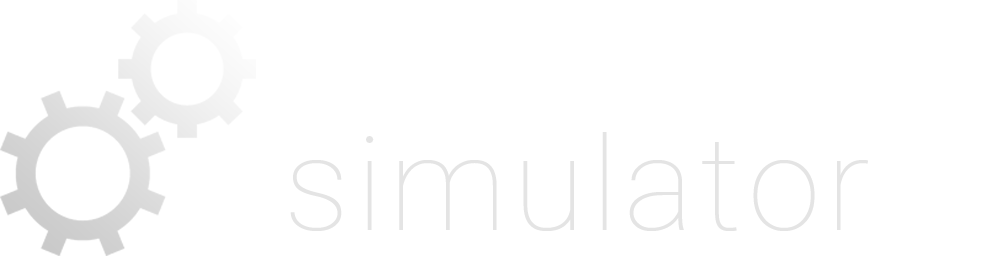
<style>
.page{position:relative;width:1000px;height:256px;background:#ffffff}
.page>*{position:absolute;margin:0}
.t1{font:130.7px "Roboto-Thin";letter-spacing:0.05em;color:#e4e4e4}
</style>
<div class="page">
<p class="t1" style="left:290px;top:132px;width:578px;height:99px">simulator</p>
</div>
